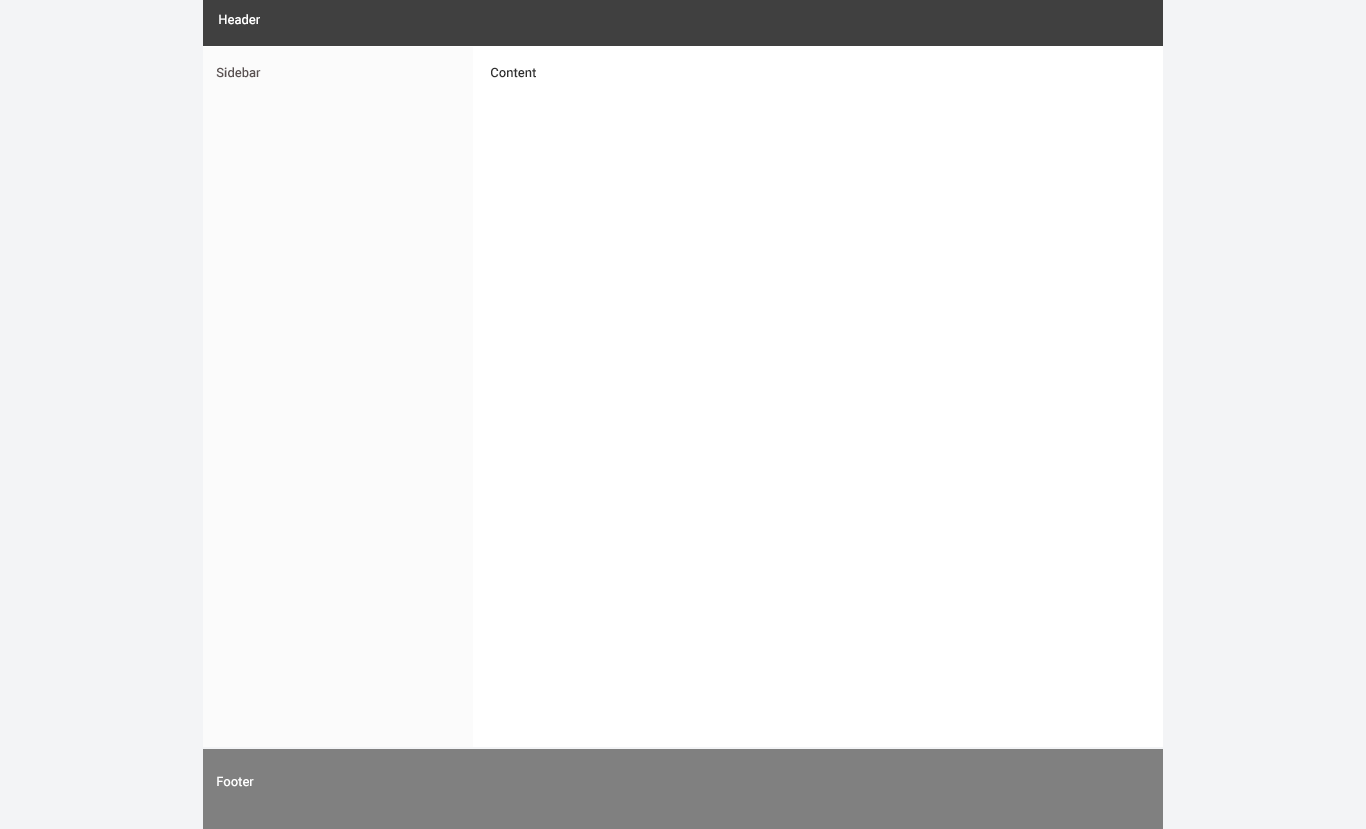
<style>
.page{position:relative;width:1366px;height:829px;background:#ffffff}
.page>*{position:absolute;margin:0}
.t1{font:13px "Roboto-Medium";color:#ffffff}
.t2{font:13px "Roboto-Medium";color:#5b5252}
.t3{font:13px "Roboto-Medium";color:#303030}
</style>
<div class="page">
<p class="t1" style="left:219px;top:14px;width:41px;height:11px">Header</p>
<p class="t2" style="left:216px;top:67px;width:45px;height:11px">Sidebar</p>
<p class="t3" style="left:491px;top:67px;width:45px;height:11px">Content</p>
<p class="t1" style="left:217px;top:776px;width:37px;height:11px">Footer</p>
</div>
